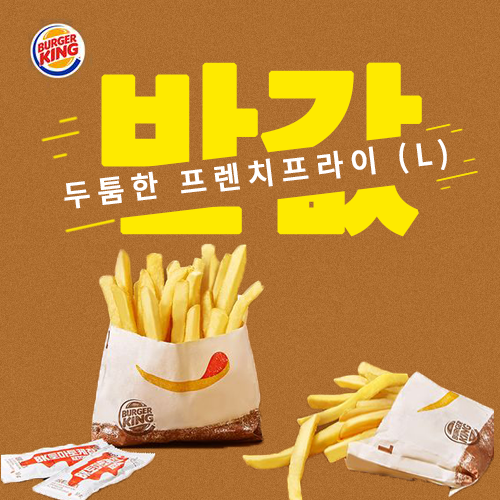
<style>
.page{position:relative;width:500px;height:500px}
.page>*{position:absolute;margin:0}
.t1{font:180px "NotoSansKR-Black";letter-spacing:-0.04em;color:#feea00;font-weight:bold}
.t2{font:30px "NotoSansKR-Medium";letter-spacing:0.2em;color:#fffffe;font-weight:bold}
</style>
<div class="page">
<p class="t1" style="left:101px;top:62px;width:321px;height:175px">반값</p>
<p class="t2" style="left:64px;top:139px;width:383px;height:70px;rotate:-7deg">두툼한 프렌치프라이 (L)</p>
</div>
